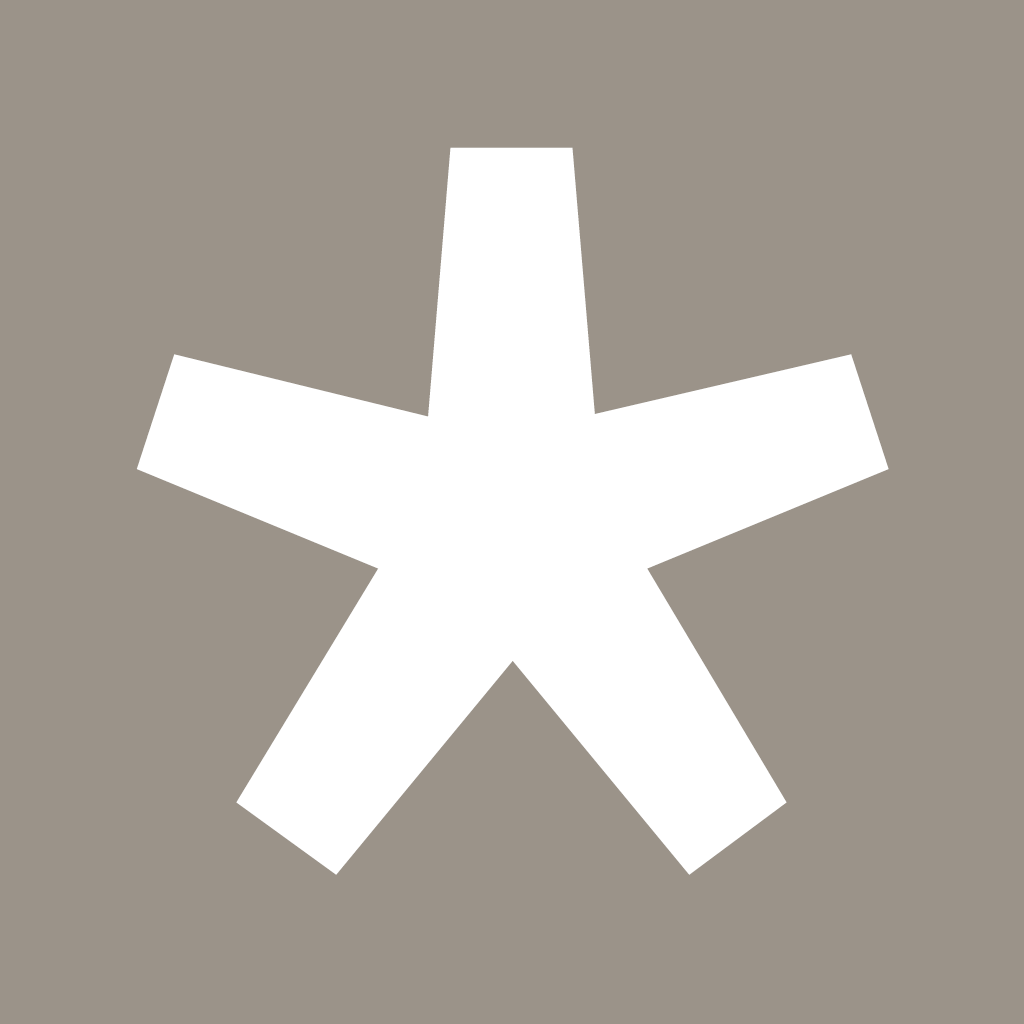
<style>
.page{position:relative;width:1024px;height:1024px;background:#9b9389}
.page>*{position:absolute;margin:0}
.t1{font:2489px "SourceSansPro-Regular";letter-spacing:0.135em;color:#ffffff;font-weight:bold}
</style>
<div class="page">
<p class="t1" style="left:136px;top:147px;width:753px;height:728px">*</p>
</div>
